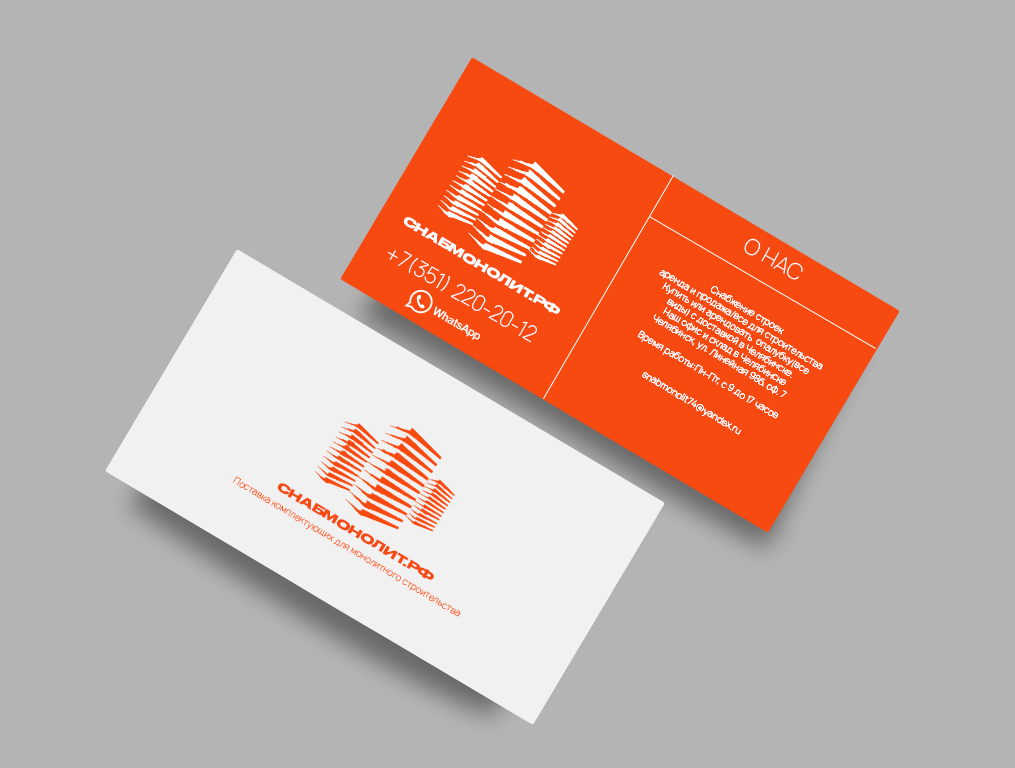
<style>
.page{position:relative;width:1015px;height:768px;background:#b4b4b4}
.page>*{position:absolute;margin:0}
.t1{font:12px "DrukWideCyr-Bold";color:#fefefe}
.t2{font:21px "Manrope-Thin";color:#ffffff}
.t3{font:9px "Manrope-Thin";color:#ffffff}
.t4{font:12px "DrukWideCyr-Bold";color:#f74a11}
</style>
<div class="page">
<p class="t1" style="left:403px;top:217px;width:157px;height:97px;rotate:31deg">СНАБМОНОЛИТ.РФ</p>
<p class="t2" style="left:744px;top:238px;width:59px;height:42px;rotate:29deg">О НАС</p>
<p class="t2" style="left:388px;top:250px;width:149px;height:93px;rotate:30deg">+7(351) 220-20-12</p>
<p class="t3" style="left:637px;top:270px;width:186px;height:165px;text-align:center;rotate:31deg">Снабжение строек<br>аренда и продажа/все для строительства<br>Купить или арендовать  опалубку(все<br>виды) с доставкой в Челябинске.<br>Наш офис и склад в Челябинске<br>Челябинск, ул. Линейная 98б, оф. 7<br><br>Время работы:Пн-Пт, с 9 до 17 часов<br><br><br>snabmonolit74@yandex.ru</p>
<p class="t3" style="left:637px;top:270px;width:186px;height:165px;text-align:center;rotate:31deg">Снабжение строек<br>аренда и продажа/все для строительства<br>Купить или арендовать  опалубку(все<br>виды) с доставкой в Челябинске.<br>Наш офис и склад в Челябинске<br>Челябинск, ул. Линейная 98б, оф. 7<br><br>Время работы:Пн-Пт, с 9 до 17 часов<br><br><br>snabmonolit74@yandex.ru</p>
<p class="t4" style="left:277px;top:483px;width:157px;height:97px;rotate:31deg">СНАБМОНОЛИТ.РФ</p>
</div>
